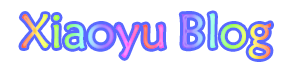
<style>
.page{position:relative;width:294px;height:68px;background:#ffffff}
.page>*{position:absolute;margin:0}
.t1{font:48px "STXinwei"}
</style>
<div class="page">
<p class="t1" style="left:21px;top:13px;width:250px;height:46px">Xiaoyu Blog</p>
</div>
